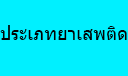
<style>
.page{position:relative;width:128px;height:76px;background:#00f0ff}
.page>*{position:absolute;margin:0}
.t1{font:18px "Tahoma";color:#000203}
</style>
<div class="page">
<p class="t1" style="left:0px;top:25px;width:127px;height:15px">ประเภทยาเสพติด</p>
</div>
